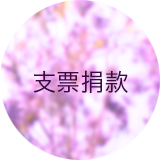
<style>
.page{position:relative;width:160px;height:160px;background:#ffffff}
.page>*{position:absolute;margin:0}
.t1{font:24px "HiraginoSansGB-W3";color:#3d0945}
</style>
<div class="page">
<p class="t1" style="left:33px;top:70px;width:95px;height:23px">支票捐款</p>
</div>
